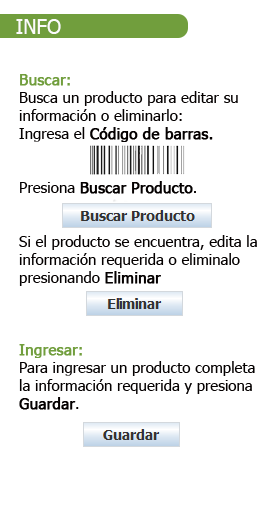
<style>
.page{position:relative;width:276px;height:505px;background:#ffffff}
.page>*{position:absolute;margin:0}
.t1{font:20px "Tahoma";color:#fcfbfb}
.t2{font:15px "Tahoma";color:#040000}
.t3{font:15px "Tahoma";color:#719e3d;font-weight:bold}
.t4{font:15px "Tahoma";color:#040000;font-weight:bold}
</style>
<div class="page">
<p class="t1" style="left:16px;top:19px;width:45px;height:15px">INFO</p>
<p class="t2" style="left:19px;top:74px;width:238px;height:336px"><span class="t3">Buscar:<br></span>Busca un producto para editar su información o eliminarlo:<br>Ingresa el <span class="t4">Código de barras.<br></span><br><br>Presiona <span class="t4">Buscar Producto</span>.<br><br><br>Si el producto se encuentra, edita la información requerida o eliminalo presionando <span class="t4">Eliminar<br><br><br></span><span class="t3"><br>Ingresar:<br></span>Para ingresar un producto completa la información requerida y presiona <span class="t4">Guardar</span>.</p>
</div>
